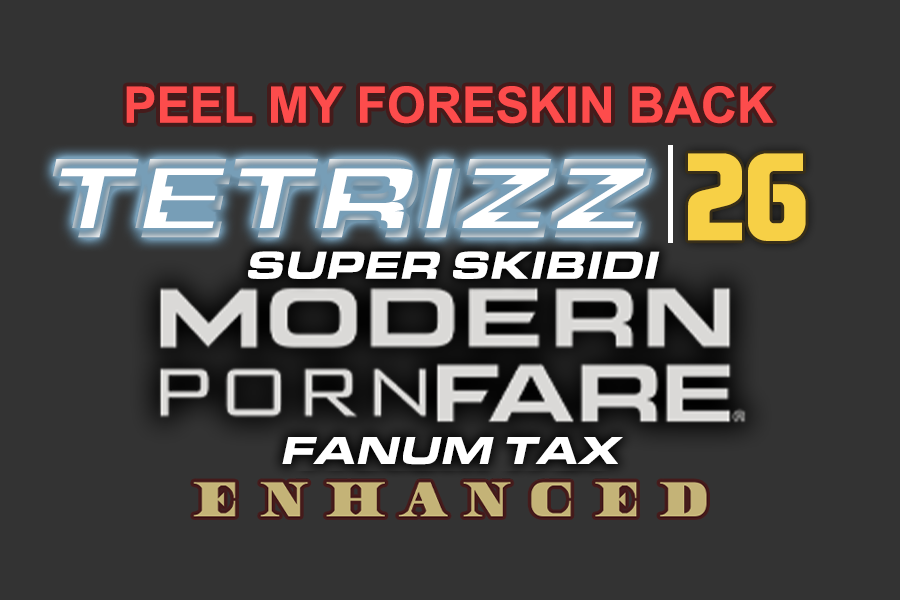
<style>
.page{position:relative;width:900px;height:600px;background:#333333}
.page>*{position:absolute;margin:0}
.t1{font:50px "Arial-BoldMT";color:#fd4c4c}
.t2{font:102.8px "EurostileExt-BlaIta"}
.t3{font:123.8px "EASansCurves-Regular";color:#f9d146}
.t4{font:40.2px "EurostileExt-BlaIta";color:#ffffff}
</style>
<div class="page">
<p class="t1" style="left:126px;top:86px;width:648px;height:38px">PEEL MY FORESKIN BACK</p>
<p class="t2" style="left:52px;top:159px;width:594px;height:69px">TETRIZZ</p>
<p class="t3" style="left:688px;top:153px;width:118px;height:88px">26</p>
<p class="t2" style="left:58px;top:168px;width:594px;height:70px">TETRIZZ</p>
<p class="t4" style="left:248px;top:251px;width:412px;height:28px">SUPER SKIBIDI</p>
<p class="t4" style="left:282px;top:437px;width:341px;height:28px">FANUM TAX</p>
</div>
